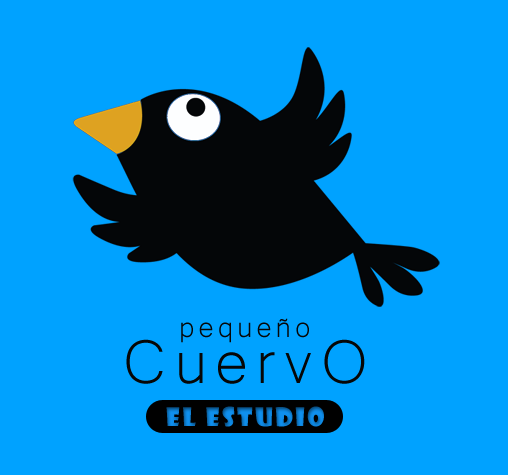
<style>
.page{position:relative;width:508px;height:475px;background:#00a2ff}
.page>*{position:absolute;margin:0}
.t1{font:37.5px "Microsoft-Yi-Baiti";letter-spacing:0.1em;color:#060707}
.t2{font:79.2px "Microsoft-Yi-Baiti";letter-spacing:0.1em;color:#060707}
.t3{font:25px "ShowcardGothic-Reg";letter-spacing:0.1em}
</style>
<div class="page">
<p class="t1" style="left:181px;top:318px;width:128px;height:25px">pequeño</p>
<p class="t2" style="left:126px;top:339px;width:239px;height:45px">CuervO</p>
<p class="t3" style="left:166px;top:406px;width:158px;height:21px">el estudio</p>
</div>
